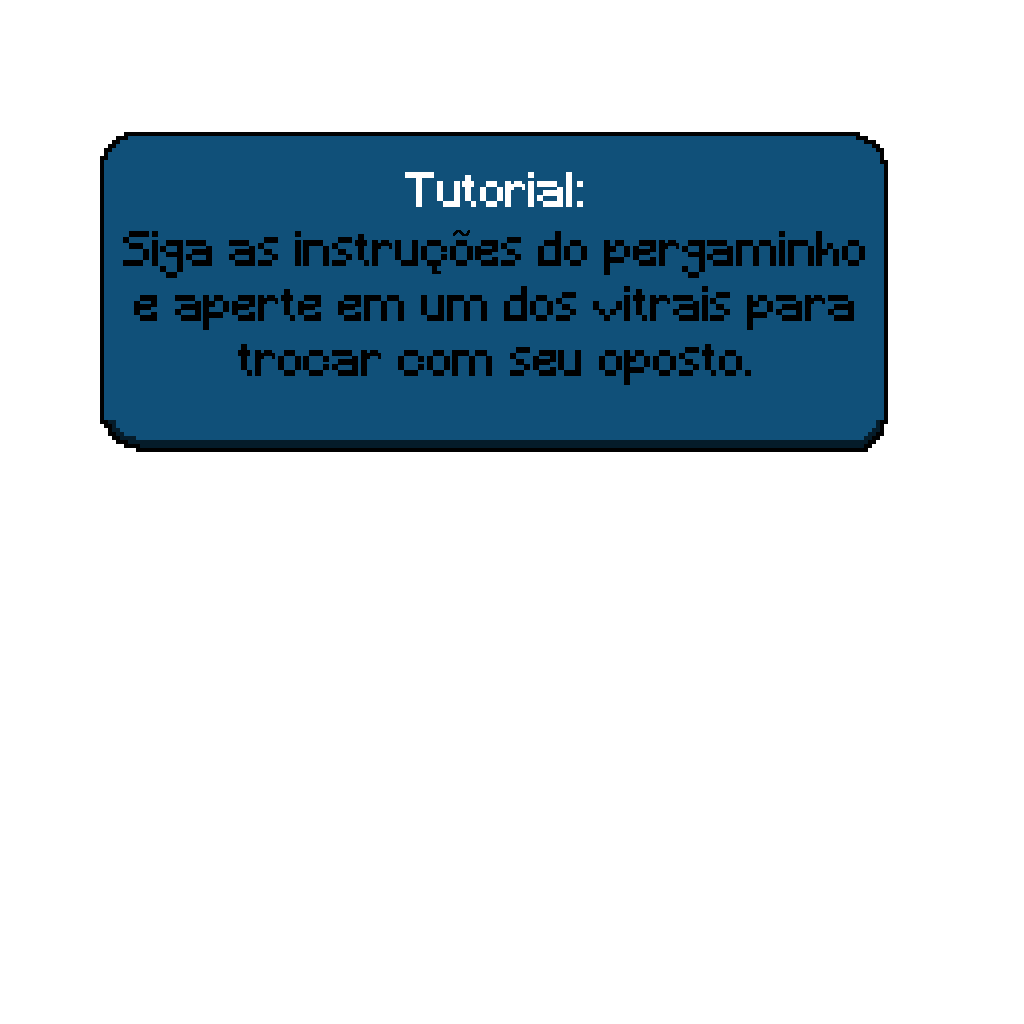
<style>
.page{position:relative;width:1024px;height:1024px;background:#ffffff}
.page>*{position:absolute;margin:0}
.t1{font:45.8px "Minecraft";color:#ffffff}
.t2{font:45.8px "Minecraft";color:#000000}
</style>
<div class="page">
<p class="t1" style="left:405px;top:172px;width:178px;height:35px">Tutorial:</p>
<p class="t2" style="left:123px;top:231px;width:742px;height:154px;text-align:center">Siga as instrucoes do pergaminho e aperte em um dos vitrais para trocar com seu oposto.</p>
</div>
